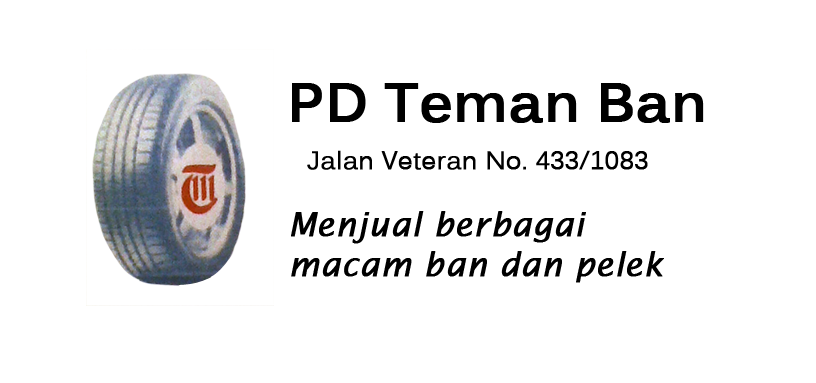
<style>
.page{position:relative;width:816px;height:383px;background:#ffffff}
.page>*{position:absolute;margin:0}
.t1{font:54.2px "Kalinga-Bold";color:#000000;font-weight:bold}
.t2{font:25px "Kalinga";color:#000000;font-weight:bold}
.t3{font:33.3px "LucidaSans-Italic";color:#000000;font-weight:bold}
</style>
<div class="page">
<p class="t1" style="left:292px;top:83px;width:412px;height:40px">PD Teman Ban</p>
<p class="t2" style="left:307px;top:150px;width:341px;height:20px">Jalan Veteran No. 433/1083</p>
<p class="t3" style="left:291px;top:211px;width:373px;height:72px">Menjual berbagai macam ban dan pelek</p>
</div>
